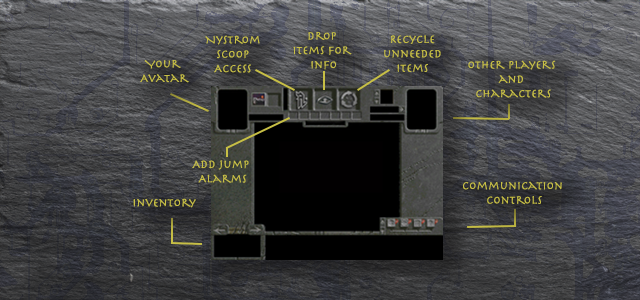
<style>
.page{position:relative;width:640px;height:300px}
.page>*{position:absolute;margin:0}
.t1{font:12px "Herculanum";color:#c7bf45}
</style>
<div class="page">
<p class="t1" style="left:205px;top:35px;width:55px;height:38px;text-align:center">Nystrom<br>scoop<br>Access</p>
<p class="t1" style="left:293px;top:32px;width:59px;height:38px;text-align:center">Drop<br>Items for<br> Info</p>
<p class="t1" style="left:384px;top:35px;width:57px;height:37px;text-align:center">Recycle<br>unneeded<br>Items</p>
<p class="t1" style="left:140px;top:60px;width:49px;height:23px;text-align:center">Your <br>Avatar</p>
<p class="t1" style="left:468px;top:60px;width:88px;height:38px;text-align:center">Other players <br>and <br>characters</p>
<p class="t1" style="left:192px;top:160px;width:57px;height:23px;text-align:center">Add Jump <br>Alarms</p>
<p class="t1" style="left:463px;top:181px;width:99px;height:24px;text-align:center">Communication <br>Controls</p>
<p class="t1" style="left:133px;top:198px;width:63px;height:10px">Inventory</p>
</div>
